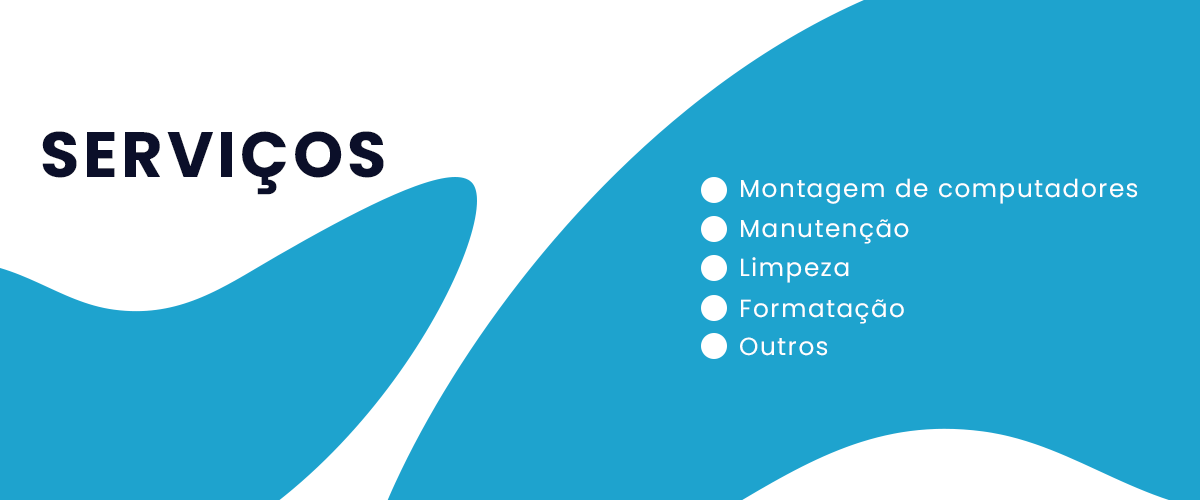
<style>
.page{position:relative;width:1200px;height:500px;background:#1ea3ce}
.page>*{position:absolute;margin:0}
.t1{font:63.9px "Poppins-Bold";letter-spacing:0.06em;color:#0b0f29}
.t2{font:24.7px "Poppins-Regular";letter-spacing:0.06em;color:#ffffff}
</style>
<div class="page">
<p class="t1" style="left:42px;top:131px;width:342px;height:64px">SERVIÇOS</p>
<p class="t2" style="left:741px;top:178px;width:397px;height:26px">Montagem de computadores</p>
<p class="t2" style="left:741px;top:219px;width:168px;height:25px">Manutenção</p>
<p class="t2" style="left:741px;top:257px;width:108px;height:26px">Limpeza</p>
<p class="t2" style="left:741px;top:299px;width:163px;height:25px">Formatação</p>
<p class="t2" style="left:740px;top:337px;width:88px;height:19px">Outros</p>
</div>
